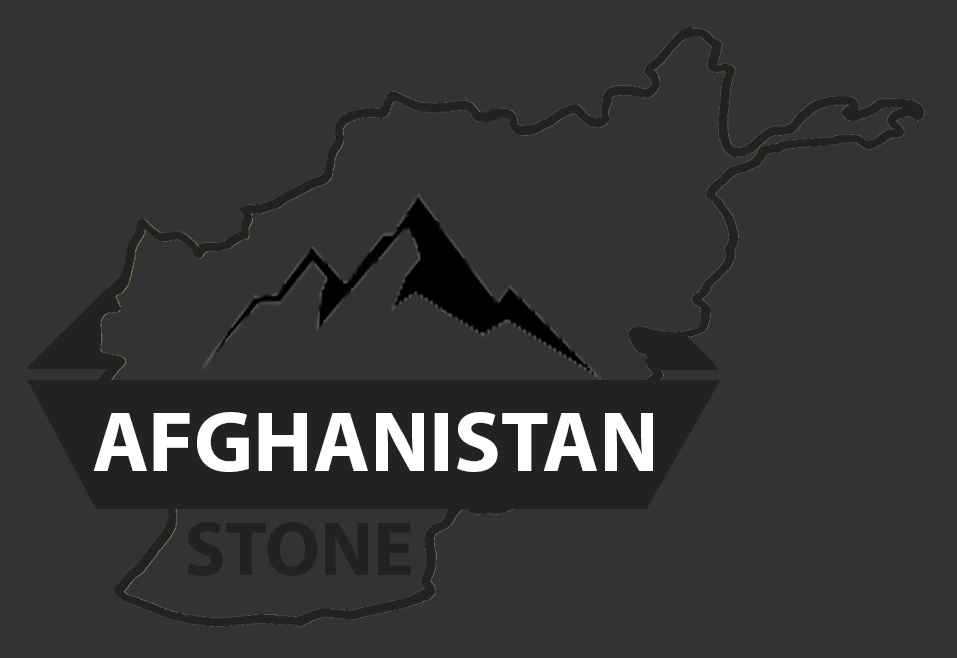
<style>
.page{position:relative;width:957px;height:658px;background:#333333}
.page>*{position:absolute;margin:0}
.t1{font:86.6px "MyriadPro-Bold";color:#ffffff}
.t2{font:76.9px "MyriadPro-Bold";color:#222222}
</style>
<div class="page">
<p class="t1" style="left:93px;top:412px;width:560px;height:60px">AFGHANISTAN</p>
<p class="t2" style="left:187px;top:522px;width:224px;height:54px">STONE</p>
</div>
